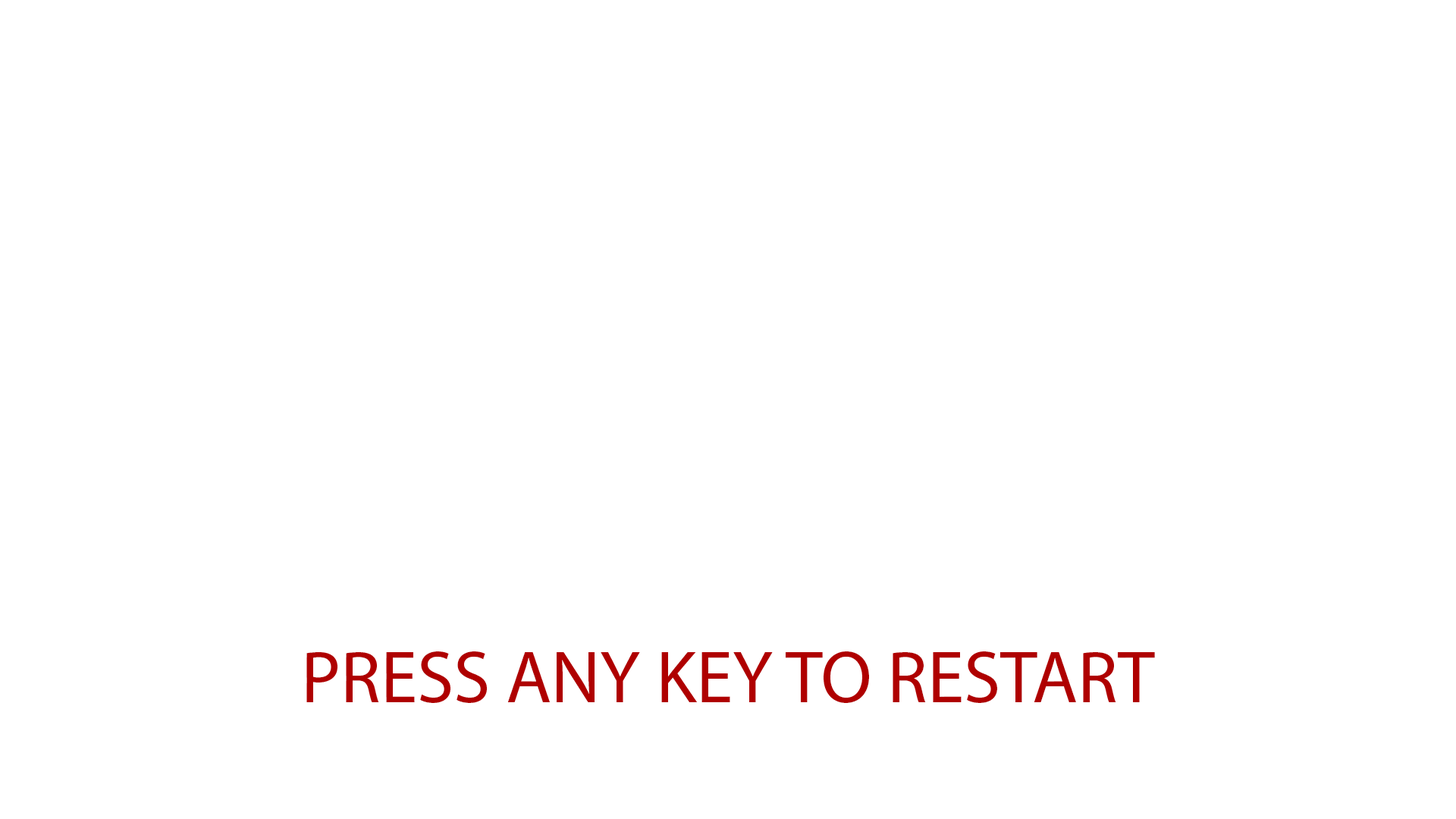
<style>
.page{position:relative;width:1456px;height:819px;background:#ffffff}
.page>*{position:absolute;margin:0}
.t1{font:74.3px "MyriadPro-Regular";color:#af0000}
</style>
<div class="page">
<p class="t1" style="left:306px;top:651px;width:849px;height:52px">PRESS ANY KEY TO RESTART</p>
</div>
